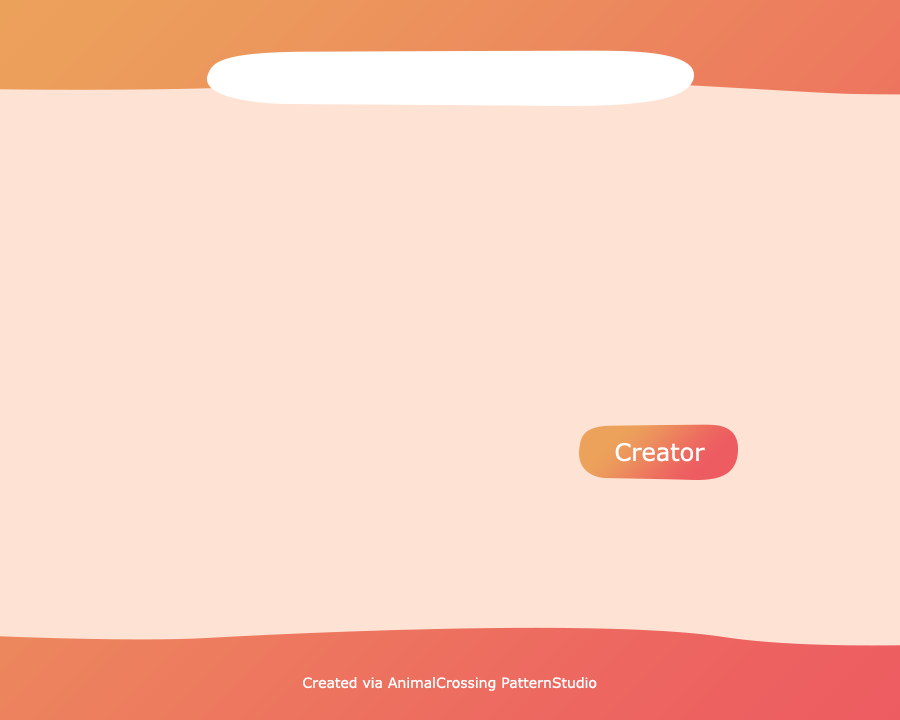
<style>
.page{position:relative;width:900px;height:720px;background:#fee2d3}
.page>*{position:absolute;margin:0}
.t1{font:24px "Verdana";color:#ffffff}
.t2{font:14px "Verdana";color:#ffffff}
</style>
<div class="page">
<p class="t1" style="left:615px;top:443px;width:90px;height:19px">Creator</p>
<p class="t2" style="left:303px;top:677px;width:294px;height:14px">Created via AnimalCrossing PatternStudio</p>
</div>
